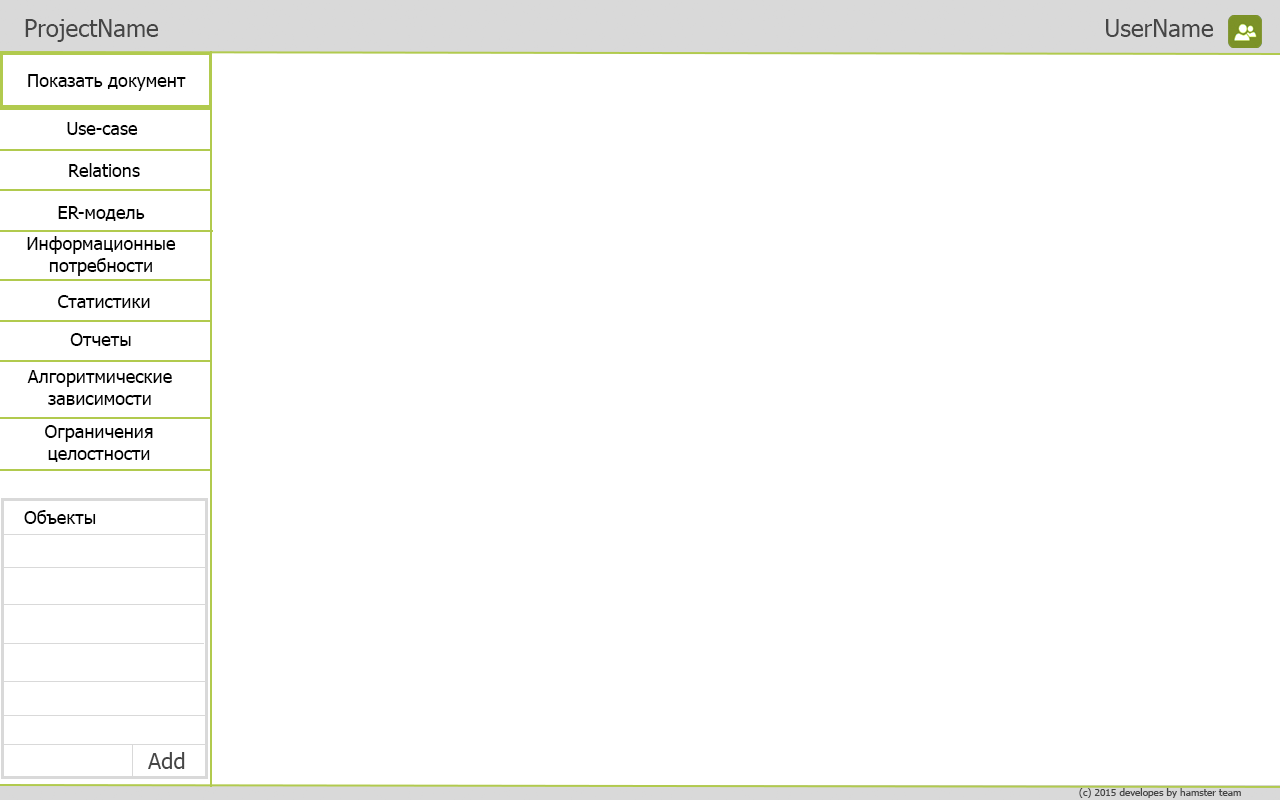
<style>
.page{position:relative;width:1280px;height:800px;background:#ffffff}
.page>*{position:absolute;margin:0}
.t1{font:24px "Tahoma";color:#464646}
.t2{font:18px "Tahoma";color:#000000}
.t3{font:22px "Tahoma";color:#464646}
.t4{font:10px "Tahoma";color:#464646}
</style>
<div class="page">
<p class="t1" style="left:25px;top:19px;width:133px;height:23px">ProjectName</p>
<p class="t1" style="left:1106px;top:19px;width:107px;height:18px">UserName</p>
<p class="t2" style="left:28px;top:74px;width:158px;height:17px">Показать документ</p>
<p class="t2" style="left:67px;top:122px;width:71px;height:13px">Use-case</p>
<p class="t2" style="left:69px;top:163px;width:71px;height:14px">Relations</p>
<p class="t2" style="left:58px;top:206px;width:87px;height:15px">ER-модель</p>
<p class="t2" style="left:27px;top:236px;width:149px;height:40px;text-align:center">Информационные<br>потребности</p>
<p class="t2" style="left:58px;top:295px;width:92px;height:13px">Статистики</p>
<p class="t2" style="left:70px;top:333px;width:61px;height:13px">Отчеты</p>
<p class="t2" style="left:27px;top:370px;width:145px;height:35px;text-align:center">Алгоритмические<br>зависимости</p>
<p class="t2" style="left:45px;top:425px;width:108px;height:37px;text-align:center">Ограничения<br>целостности</p>
<p class="t2" style="left:24px;top:510px;width:72px;height:14px">Объекты</p>
<p class="t3" style="left:148px;top:752px;width:37px;height:17px">Add</p>
<p class="t4" style="left:1079px;top:788px;width:162px;height:10px">(c) 2015 developes by hamster team</p>
</div>
